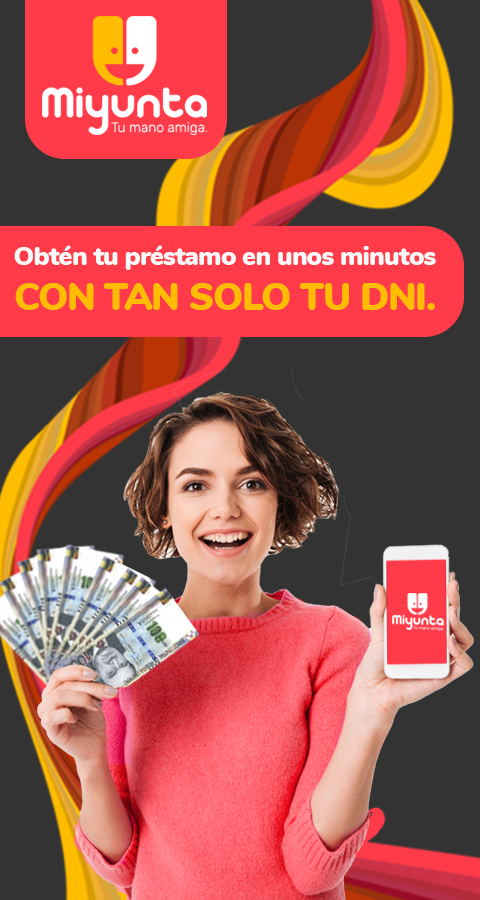
<style>
.page{position:relative;width:480px;height:900px;background:#333333}
.page>*{position:absolute;margin:0}
.t1{font:26px "Nunito-Black";letter-spacing:-0.03em;color:#f9f9f9}
.t2{font:38px "Nunito-Black";letter-spacing:-0.03em;color:#ffbc00}
</style>
<div class="page">
<p class="t1" style="left:14px;top:245px;width:422px;height:65px">Obtén tu préstamo en unos minutos<br><span class="t2">CON TAN SOLO TU DNI.</span></p>
</div>
